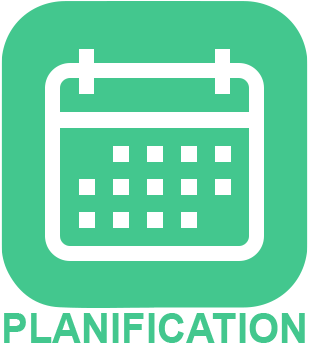
<style>
.page{position:relative;width:309px;height:348px;background:#43c78e}
.page>*{position:absolute;margin:0}
.t1{font:41.3px "Arial-BoldMT";color:#43c78e}
</style>
<div class="page">
<p class="t1" style="left:4px;top:313px;width:301px;height:30px">PLANIFICATION</p>
</div>
